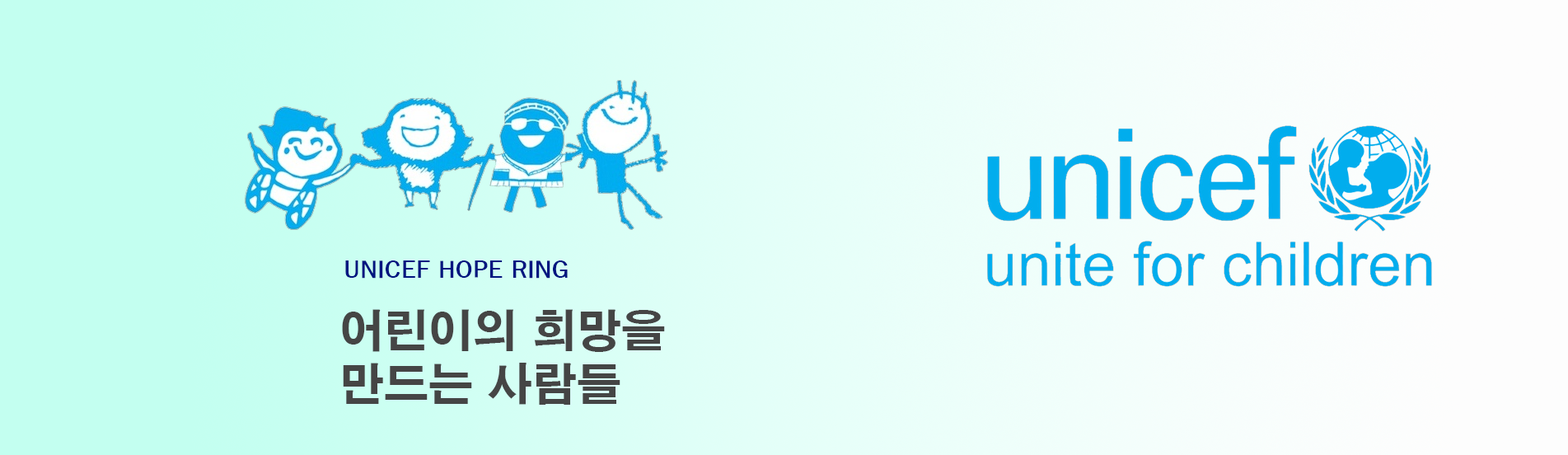
<style>
.page{position:relative;width:1568px;height:455px}
.page>*{position:absolute;margin:0}
.t1{font:24.7px "HYsupM";color:#001580}
.t2{font:44.5px "HYgtrE";color:#454545}
</style>
<div class="page">
<p class="t1" style="left:345px;top:260px;width:223px;height:18px">UNICEF HOPE RING</p>
<p class="t2" style="left:342px;top:309px;width:323px;height:96px">어린이의 희망을<br>만드는 사람들</p>
</div>
